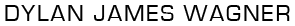
<style>
.page{position:relative;width:295px;height:26px;background:#ffffff}
.page>*{position:absolute;margin:0}
.t1{font:24px "EurostileRegular";letter-spacing:0.08em;color:#000000;text-transform:uppercase}
</style>
<div class="page">
<p class="t1" style="left:5px;top:5px;width:285px;height:16px">Dylan James Wagner</p>
</div>
